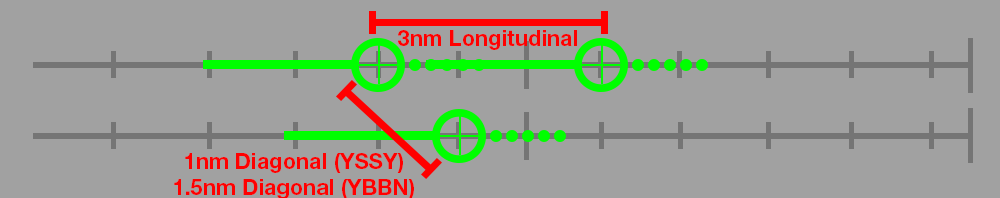
<style>
.page{position:relative;width:1000px;height:198px;background:#a1a1a1}
.page>*{position:absolute;margin:0}
.t1{font:21.9px "HelveticaNeueLTStd-Bd";color:#ff0000}
</style>
<div class="page">
<p class="t1" style="left:398px;top:30px;width:179px;height:20px">3nm Longitudinal</p>
<p class="t1" style="left:174px;top:153px;width:240px;height:46px;text-align:center">1nm Diagonal (YSSY)<br>1.5nm Diagonal (YBBN)</p>
</div>
